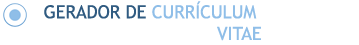
<style>
.page{position:relative;width:359px;height:45px;background:#ffffff}
.page>*{position:absolute;margin:0}
.t1{font:18px "TrebuchetMS";color:#8fbee8}
.t2{font:18px "TrebuchetMS";color:#305b81}
</style>
<div class="page">
<p class="t1" style="left:44px;top:1px;width:217px;height:40px;text-align:right"><span class="t2">GERADOR DE </span>CURRÍCULUM <br>VITAE</p>
</div>
